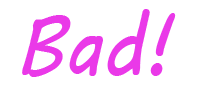
<style>
.page{position:relative;width:200px;height:100px;background:#ffffff}
.page>*{position:absolute;margin:0}
.t1{font:88.1px "MVBoli";color:#ea39e8;scale:0.89 1}
</style>
<div class="page">
<p class="t1" style="left:22px;top:9px;width:154px;height:68px">Bad!</p>
</div>
